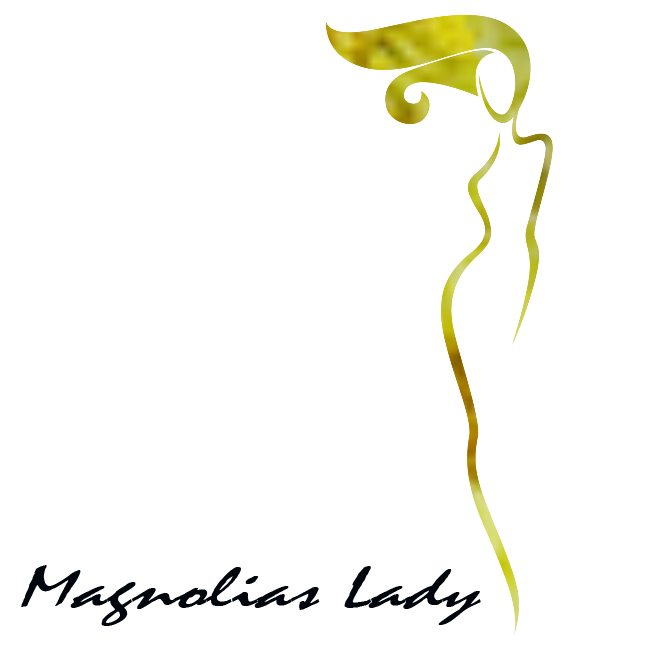
<style>
.page{position:relative;width:650px;height:651px;background:#ffffff}
.page>*{position:absolute;margin:0}
.t1{font:60px "Mistral";letter-spacing:0.005em;color:#01060c;font-style:italic;scale:1.5 1}
</style>
<div class="page">
<p class="t1" style="left:21px;top:565px;width:460px;height:61px">Magnolias Lady</p>
</div>
